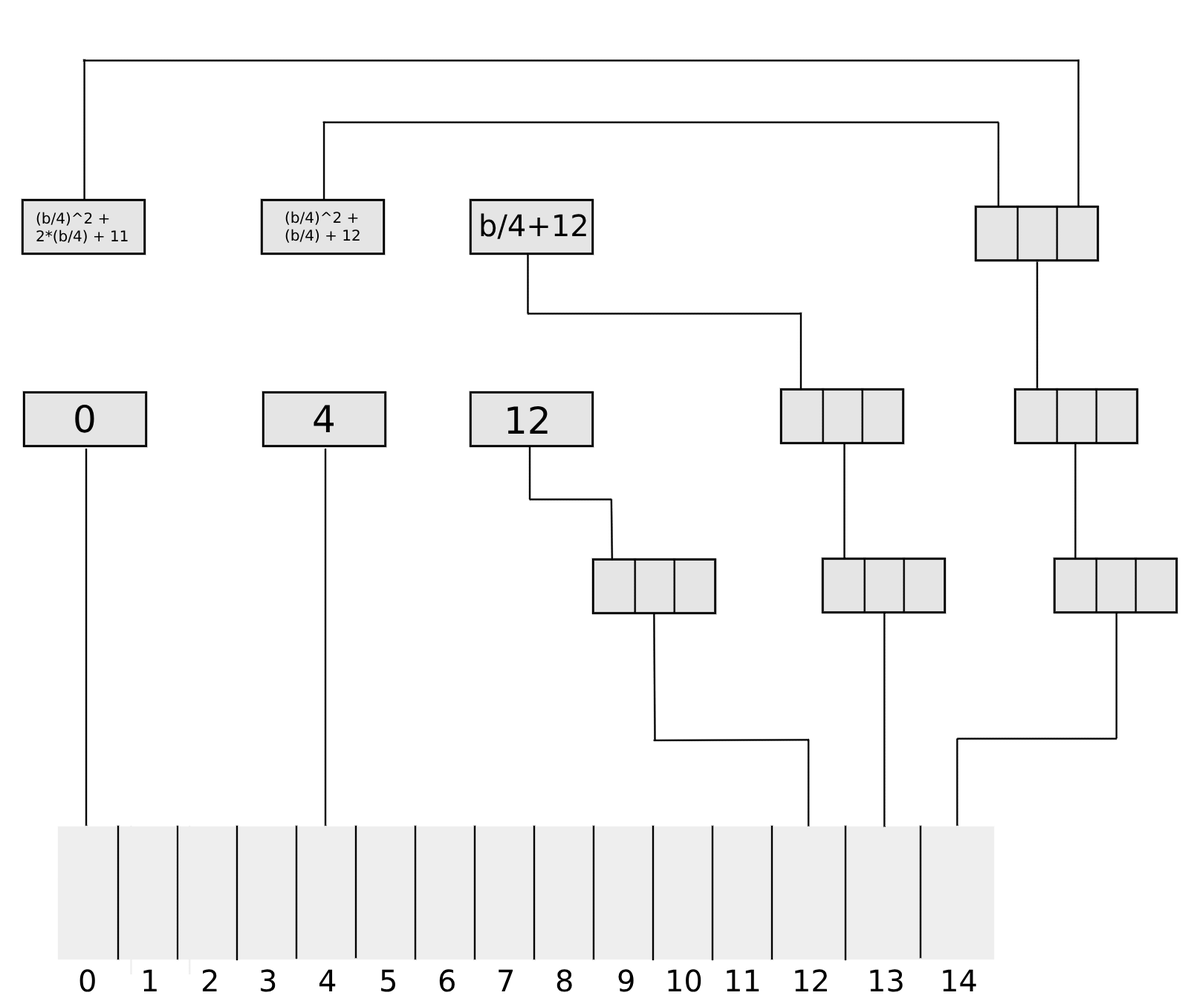
<style>
.page{position:relative;width:1188px;height:1004px;background:#ffffff}
.page>*{position:absolute;margin:0}
.t1{font:14.9px "DejaVuSans";color:#000000}
.t2{font:29.7px "DejaVuSans";color:#000000}
.t3{font:37.1px "DejaVuSans";color:#000000}
</style>
<div class="page">
<p class="t1" style="left:36px;top:212px;width:92px;height:32px">(b/4)^2 +<br>2*(b/4) + 11</p>
<p class="t1" style="left:285px;top:211px;width:74px;height:32px">(b/4)^2 +<br>(b/4) + 12</p>
<p class="t2" style="left:481px;top:213px;width:105px;height:26px">b/4+12</p>
<p class="t3" style="left:75px;top:404px;width:19px;height:29px">0</p>
<p class="t3" style="left:313px;top:405px;width:21px;height:27px">4</p>
<p class="t3" style="left:507px;top:406px;width:40px;height:28px">12</p>
<p class="t2" style="left:79px;top:969px;width:16px;height:23px">0</p>
<p class="t2" style="left:143px;top:969px;width:14px;height:22px">1</p>
<p class="t2" style="left:202px;top:969px;width:15px;height:22px">2</p>
<p class="t2" style="left:261px;top:969px;width:15px;height:23px">3</p>
<p class="t2" style="left:319px;top:969px;width:17px;height:22px">4</p>
<p class="t2" style="left:381px;top:969px;width:14px;height:23px">5</p>
<p class="t2" style="left:439px;top:969px;width:16px;height:23px">6</p>
<p class="t2" style="left:498px;top:969px;width:15px;height:22px">7</p>
<p class="t2" style="left:556px;top:969px;width:16px;height:23px">8</p>
<p class="t2" style="left:618px;top:969px;width:16px;height:23px">9</p>
<p class="t2" style="left:668px;top:969px;width:33px;height:23px">10</p>
<p class="t2" style="left:726px;top:969px;width:33px;height:22px">11</p>
<p class="t2" style="left:795px;top:969px;width:32px;height:22px">12</p>
<p class="t2" style="left:870px;top:969px;width:32px;height:23px">13</p>
<p class="t2" style="left:942px;top:969px;width:34px;height:22px">14</p>
</div>
